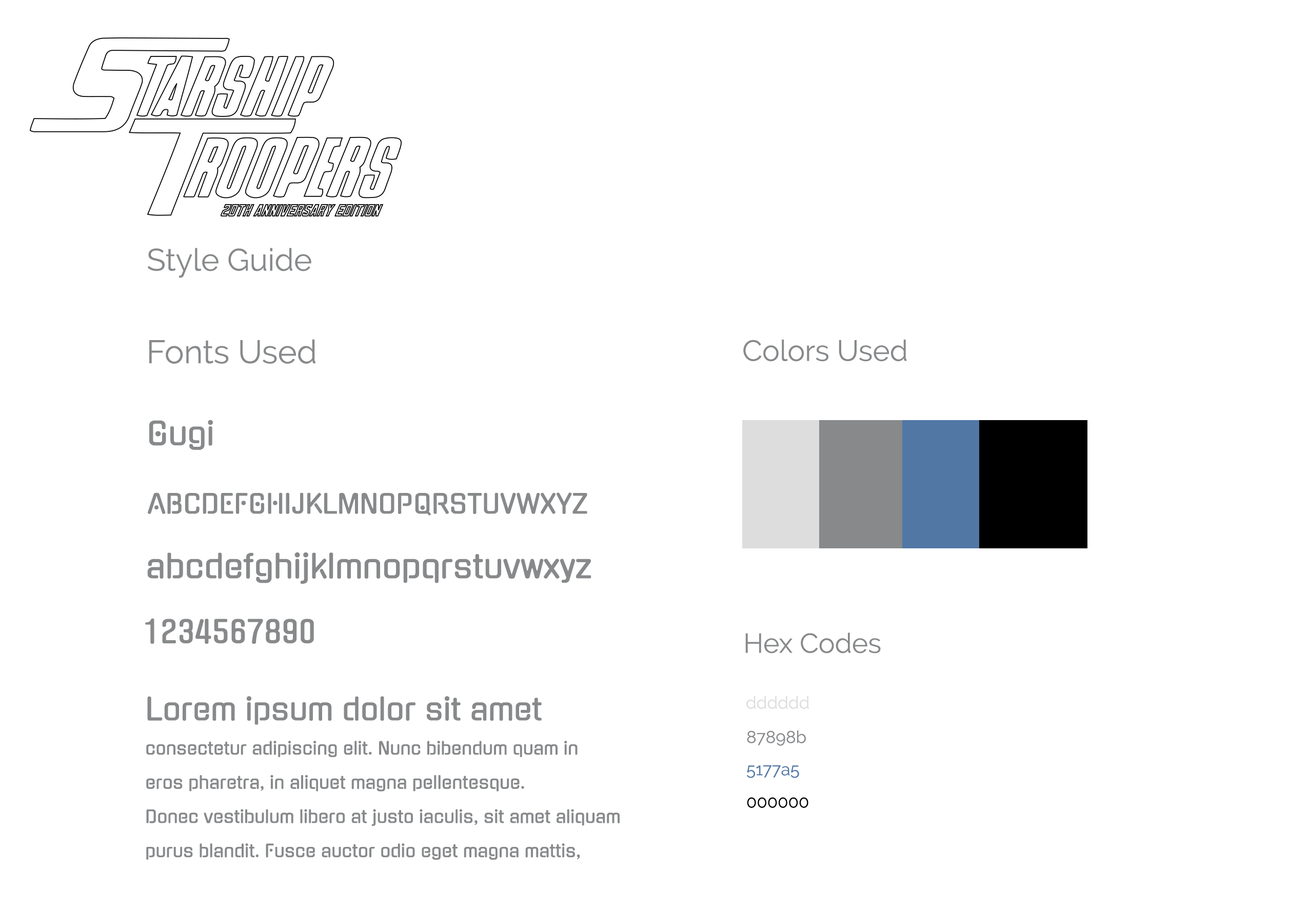
<style>
.page{position:relative;width:1308px;height:911px;background:#ffffff}
.page>*{position:absolute;margin:0}
.t1{font:31px "Raleway-Regular";color:#87898b}
.t2{font:32.5px "Raleway-Regular";color:#87898b}
.t3{font:29.2px "Raleway-Regular";color:#87898b}
.t4{font:31.3px "Gugi-Regular";color:#87898b}
.t5{font:26px "Gugi-Regular";color:#87898b}
.t6{font:32px "Gugi-Regular";color:#87898b}
.t7{font:30.5px "Gugi-Regular";color:#87898b}
.t8{font:27.4px "Raleway-Regular";color:#87898b}
.t9{font:17.1px/34.2px "Gugi-Regular";color:#87898b}
.t10{font:29.9px/34.2px "Gugi-Regular";color:#87898b}
.t11{font:17.1px "Raleway-Regular";color:#dddddd}
.t12{font:17.1px "Raleway-Regular";color:#87898b}
.t13{font:17.1px "Raleway-Regular";color:#5177a5}
.t14{font:17.1px "Raleway-Regular";color:#000000}
</style>
<div class="page">
<p class="t1" style="left:148px;top:248px;width:163px;height:30px">Style Guide</p>
<p class="t2" style="left:149px;top:339px;width:167px;height:25px">Fonts Used</p>
<p class="t3" style="left:744px;top:340px;width:163px;height:22px">Colors Used</p>
<p class="t4" style="left:149px;top:420px;width:64px;height:30px">Gugi</p>
<p class="t5" style="left:148px;top:493px;width:440px;height:23px">ABCDEFGHIJKLMNOPQRSTUVWXYZ</p>
<p class="t6" style="left:147px;top:552px;width:445px;height:32px">abcdefghijklmnopqrstuvwxyz</p>
<p class="t7" style="left:145px;top:618px;width:169px;height:26px">1234567890</p>
<p class="t8" style="left:746px;top:633px;width:135px;height:21px">Hex Codes</p>
<p class="t9" style="left:146px;top:696px;width:474px;height:164px"><span class="t10">Lorem ipsum dolor sit amet <br></span>consectetur adipiscing elit. Nunc bibendum quam in <br>eros pharetra, in aliquet magna pellentesque. <br>Donec vestibulum libero at justo iaculis, sit amet aliquam <br>purus blandit. Fusce auctor odio eget magna mattis,</p>
<p class="t11" style="left:747px;top:696px;width:62px;height:13px">dddddd</p>
<p class="t12" style="left:747px;top:731px;width:59px;height:15px">87898b</p>
<p class="t13" style="left:747px;top:766px;width:52px;height:12px">5177a5</p>
<p class="t14" style="left:747px;top:797px;width:62px;height:11px">000000</p>
</div>
